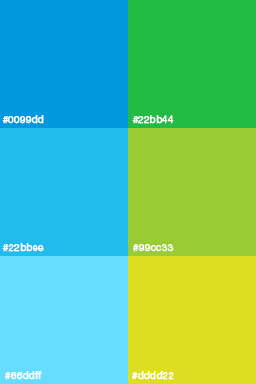
<style>
.page{position:relative;width:256px;height:384px}
.page>*{position:absolute;margin:0}
.t1{font:10px "HelveticaNeueLTStd-Roman";color:#ffffff;font-weight:bold}
</style>
<div class="page">
<p class="t1" style="left:2px;top:115px;width:42px;height:9px">#0099dd</p>
<p class="t1" style="left:132px;top:115px;width:42px;height:9px">#22bb44</p>
<p class="t1" style="left:2px;top:243px;width:42px;height:9px">#22bbee</p>
<p class="t1" style="left:133px;top:244px;width:41px;height:8px">#99cc33</p>
<p class="t1" style="left:5px;top:371px;width:37px;height:9px">#66ddff</p>
<p class="t1" style="left:132px;top:371px;width:42px;height:9px">#dddd22</p>
</div>
